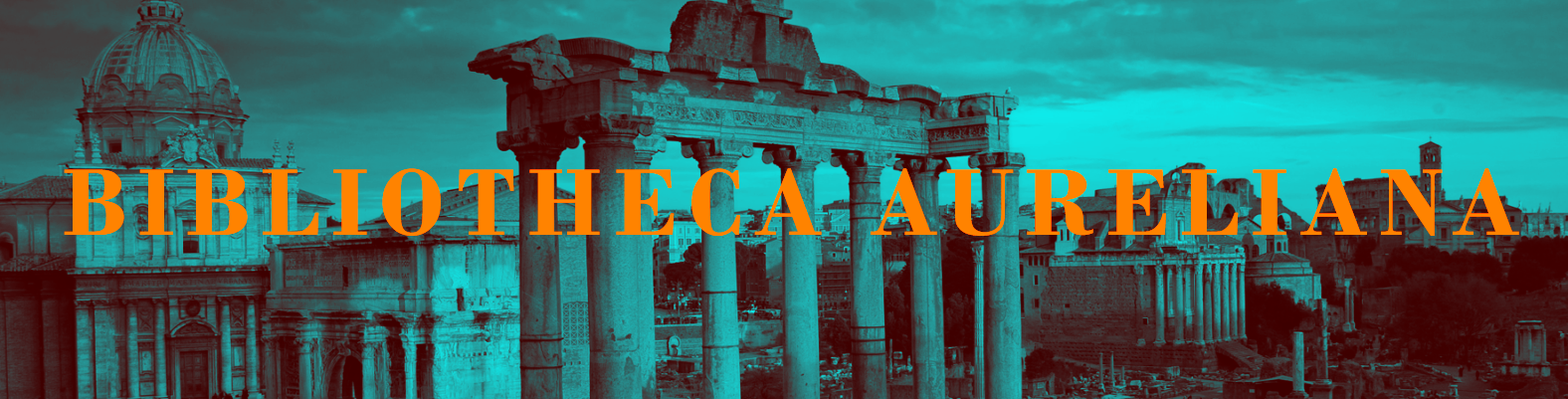
<style>
.page{position:relative;width:1568px;height:399px}
.page>*{position:absolute;margin:0}
.t1{font:99.5px "BodoniMT-Bold";letter-spacing:0.11em;color:#ff8300}
</style>
<div class="page">
<p class="t1" style="left:64px;top:168px;width:1455px;height:68px">BIBLIOTHECA AURELIANA</p>
</div>
